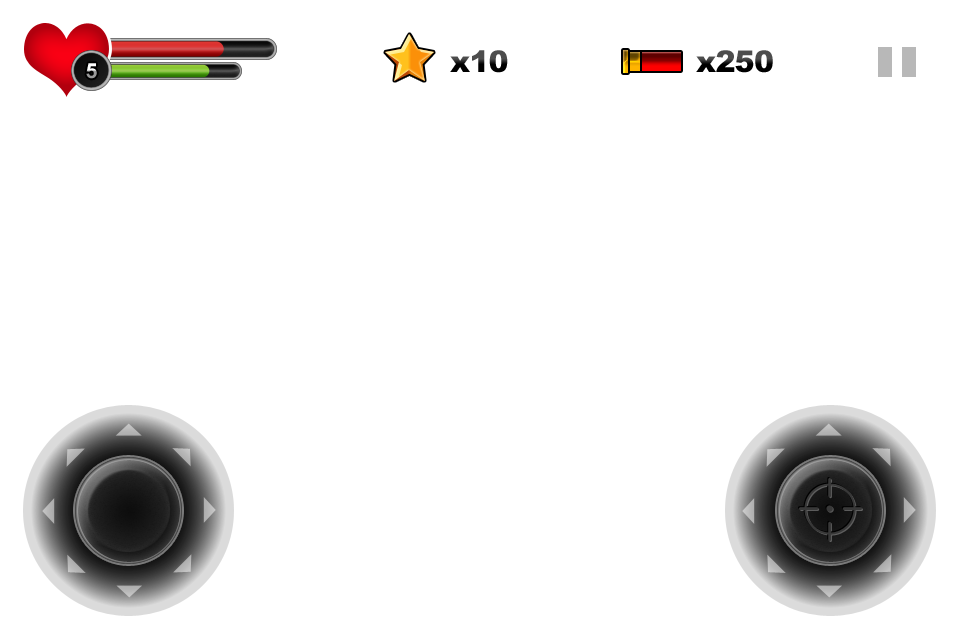
<style>
.page{position:relative;width:960px;height:640px;background:#ffffff}
.page>*{position:absolute;margin:0}
.t1{font:30px "Arial-Black";letter-spacing:-0.025em}
.t2{font:20.9px "Arial-BoldMT";letter-spacing:-0.05em}
</style>
<div class="page">
<p class="t1" style="left:450px;top:50px;width:58px;height:23px">x10</p>
<p class="t1" style="left:696px;top:50px;width:77px;height:23px">x250</p>
<p class="t2" style="left:86px;top:63px;width:11px;height:16px">5</p>
</div>
